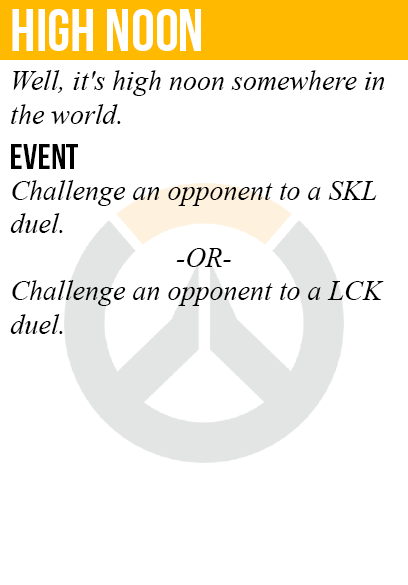
<style>
.page{position:relative;width:408px;height:585px;background:#ffffff}
.page>*{position:absolute;margin:0}
.t1{font:60px "BebasNeue";color:#ffffff}
.t2{font:28px "TimesNewRomanPS-ItalicMT";color:#000000}
.t3{font:36px "BebasNeue";color:#000000}
</style>
<div class="page">
<p class="t1" style="left:12px;top:9px;width:189px;height:42px">high noon</p>
<p class="t2" style="left:11px;top:70px;width:374px;height:54px">Well, it's high noon somewhere in<br>the world.</p>
<p class="t3" style="left:11px;top:144px;width:67px;height:25px">event</p>
<p class="t2" style="left:10px;top:180px;width:374px;height:154px">Challenge an opponent to a SKL<br>duel.<br><br>Challenge an opponent to a LCK<br>duel.</p>
<p class="t2" style="left:176px;top:248px;width:55px;height:19px">-OR-</p>
</div>
